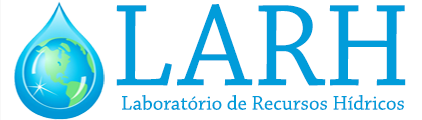
<style>
.page{position:relative;width:422px;height:120px;background:#ffffff}
.page>*{position:absolute;margin:0}
.t1{font:122.6px "ChaparralPro-Regular";color:#019cda}
.t2{font:20.8px "ChaparralPro-Regular";color:#019cda}
</style>
<div class="page">
<p class="t1" style="left:116px;top:4px;width:290px;height:82px">LARH</p>
<p class="t2" style="left:122px;top:95px;width:282px;height:15px">Laboratório de Recursos Hídricos</p>
</div>
